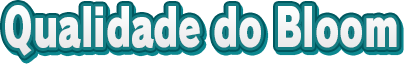
<style>
.page{position:relative;width:404px;height:66px;background:#ffffff}
.page>*{position:absolute;margin:0}
.t1{font:52px "RodinPro-UB";letter-spacing:-0.003em;color:#f2f2f3;scale:0.7 1}
</style>
<div class="page">
<p class="t1" style="left:5px;top:5px;width:392px;height:51px">Qualidade do Bloom</p>
</div>
